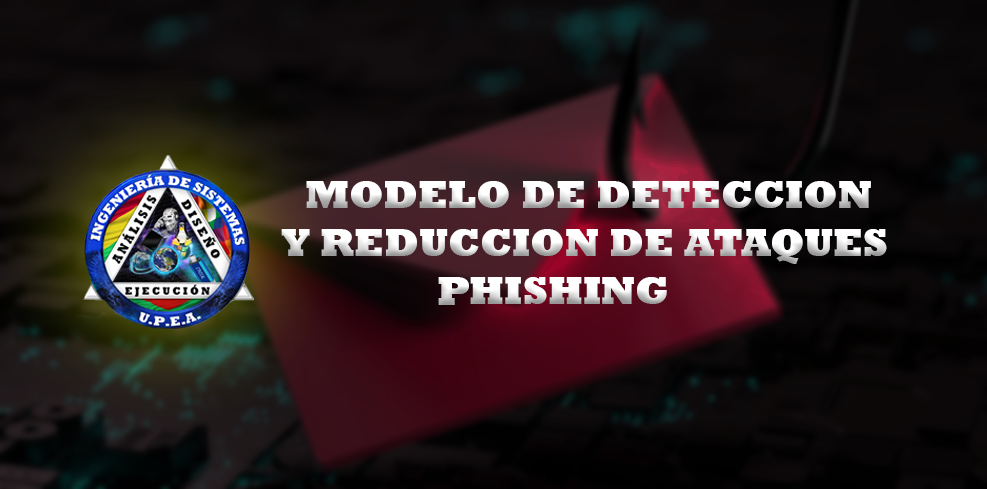
<style>
.page{position:relative;width:987px;height:489px}
.page>*{position:absolute;margin:0}
.t1{font:40px "Rockwell-ExtraBold"}
.t2{font:40px "Prompt-Black"}
</style>
<div class="page">
<p class="t1" style="left:281px;top:181px;width:606px;height:124px"><span class="t2">  </span>MODELO DE DETECCION <br>Y REDUCCION DE ATAQUES<br>             PHISHING</p>
</div>
